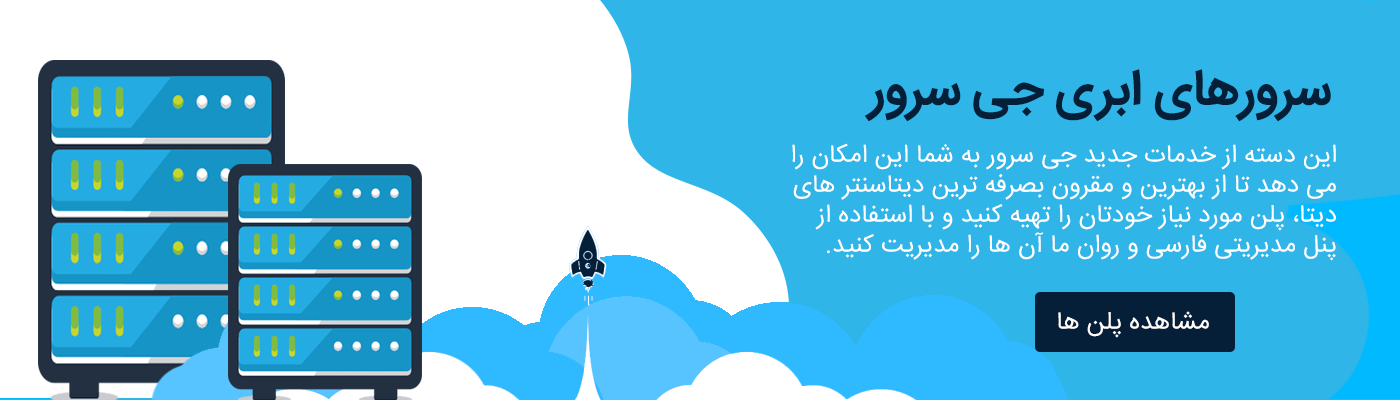
<style>
.page{position:relative;width:1400px;height:400px;background:#2fb5e7}
.page>*{position:absolute;margin:0}
.t1{font:50px "IRANSans-Bold";color:#061f39}
.t2{font:25px "IRANSans";color:#ffffff}
</style>
<div class="page">
<p class="t1" style="left:864px;top:69px;width:467px;height:53px">سرورهای ابری جی سرور</p>
<p class="t2" style="left:792px;top:143px;width:544px;height:118px">این دسته از خدمات جدید جی سرور به شما این امکان را می دهد تا از بهترین و مقرون بصرفه ترین دیتاسنتر های دیتا، پلن مورد نیاز خودتان را تهیه کنید و با استفاده از <br>پنل مدیریتی فارسی و روان ما آن ها را مدیریت کنید.</p>
<p class="t2" style="left:1058px;top:311px;width:151px;height:27px">مشاهده پلن ها</p>
</div>
